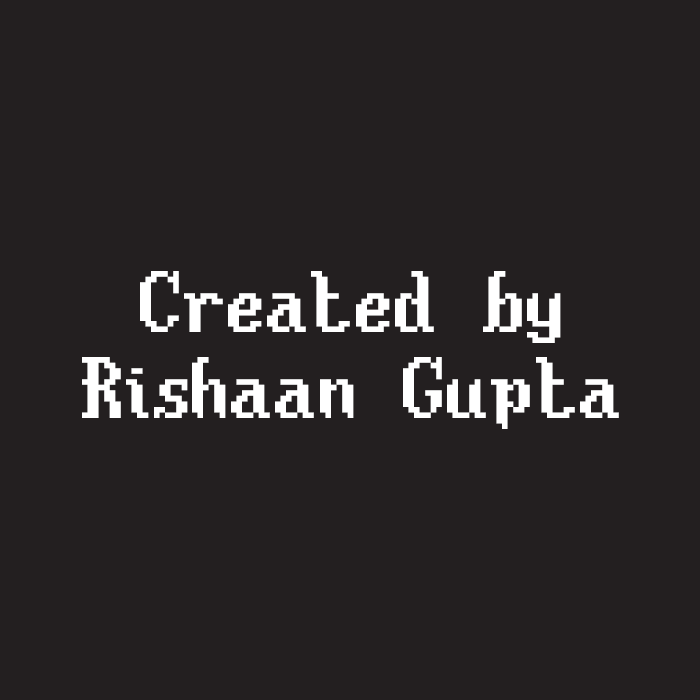
<style>
.page{position:relative;width:700px;height:700px;background:#231f20}
.page>*{position:absolute;margin:0}
.t1{font:72px "Gold-Box-8x16";color:#ffffff}
</style>
<div class="page">
<p class="t1" style="left:82px;top:271px;width:537px;height:158px;text-align:center">Created by<br>Rishaan Gupta</p>
</div>
